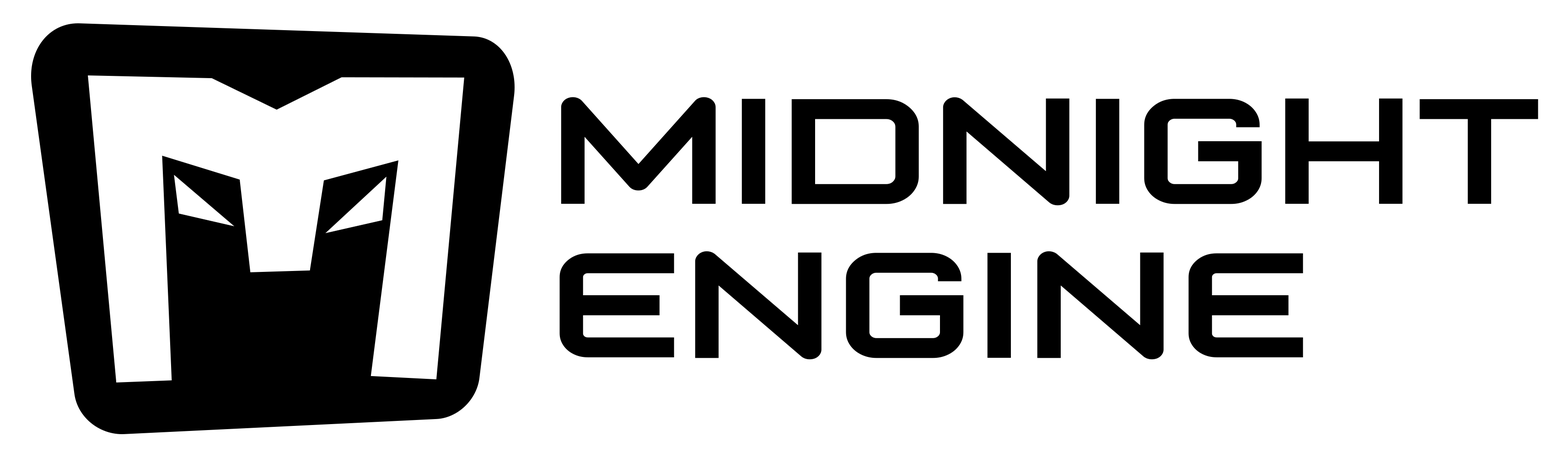
<style>
.page{position:relative;width:1568px;height:457px;background:#ffffff}
.page>*{position:absolute;margin:0}
.t1{font:166.8px/153.9px "JupiterMissionRegular";color:#000000}
</style>
<div class="page">
<p class="t1" style="left:559px;top:97px;width:979px;height:263px">MIDNIGHT<br>ENGINE</p>
</div>
